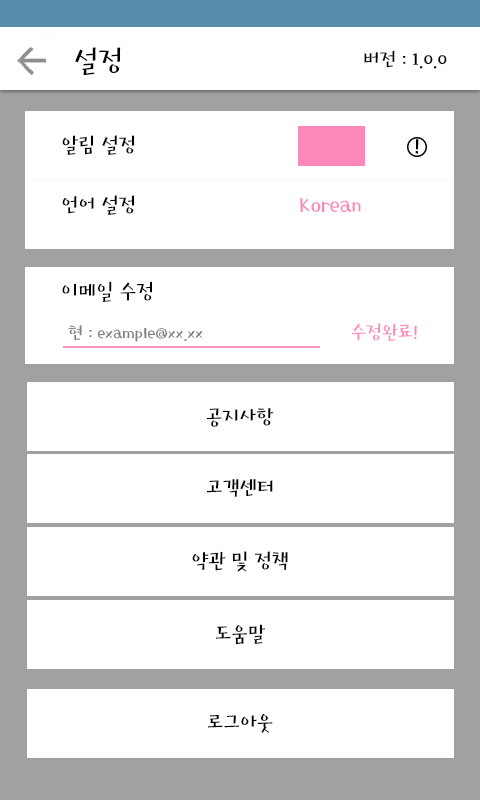
<style>
.page{position:relative;width:480px;height:800px;background:#ffffff}
.page>*{position:absolute;margin:0}
.t1{font:30px "HoonMakdR";color:#000000}
.t2{font:20px "HoonMakdR";color:#000000}
.t3{font:21px "HoonMakdR";color:#010101}
.t4{font:24px "HoonMakdR";color:#fb88b9}
.t5{font:22px "HoonMakdR";color:#000000}
.t6{font:18px "HoonMakdR";color:#818080;scale:1.03 1}
.t7{font:20px "HoonMakdR";color:#fe8cba;scale:0.97 1}
</style>
<div class="page">
<p class="t1" style="left:75px;top:47px;width:46px;height:29px">설정</p>
<p class="t2" style="left:364px;top:50px;width:83px;height:19px">버전 : 1.0.0</p>
<p class="t3" style="left:62px;top:135px;width:73px;height:20px">알림 설정</p>
<p class="t3" style="left:62px;top:195px;width:73px;height:20px">언어 설정</p>
<p class="t4" style="left:300px;top:198px;width:61px;height:15px">Korean</p>
<p class="t5" style="left:62px;top:281px;width:90px;height:21px">이메일 수정</p>
<p class="t6" style="left:68px;top:325px;width:135px;height:17px">현 : example@xx.xx</p>
<p class="t7" style="left:351px;top:323px;width:66px;height:19px">수정완료!</p>
<p class="t3" style="left:206px;top:408px;width:68px;height:19px">공지사항</p>
<p class="t3" style="left:206px;top:479px;width:67px;height:18px">고객센터</p>
<p class="t3" style="left:192px;top:551px;width:96px;height:21px">약관 및 정책</p>
<p class="t3" style="left:216px;top:624px;width:49px;height:21px">도움말</p>
<p class="t3" style="left:208px;top:713px;width:65px;height:20px">로그아웃</p>
</div>
